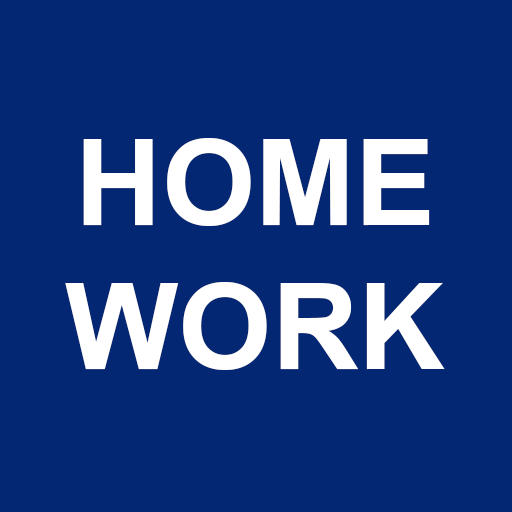
<style>
.page{position:relative;width:512px;height:512px;background:#042774}
.page>*{position:absolute;margin:0}
.t1{font:120px "Arial-BoldMT";color:#ffffff}
</style>
<div class="page">
<p class="t1" style="left:65px;top:138px;width:380px;height:232px;text-align:center">HOME<br>WORK</p>
</div>
